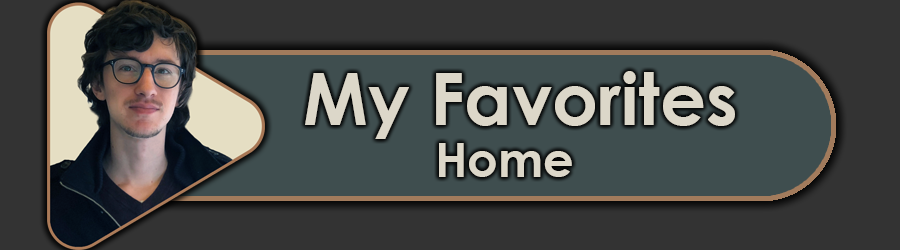
<style>
.page{position:relative;width:900px;height:250px;background:#333333}
.page>*{position:absolute;margin:0}
.t1{font:72px "CenturyGothic-Bold";color:#dcd7c9}
.t2{font:48px "CenturyGothic-Bold";color:#dcd7c9}
</style>
<div class="page">
<p class="t1" style="left:305px;top:71px;width:430px;height:68px">My Favorites</p>
<p class="t2" style="left:439px;top:143px;width:133px;height:34px">Home</p>
</div>
